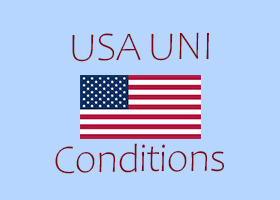
<style>
.page{position:relative;width:280px;height:200px;background:#b7d6ff}
.page>*{position:absolute;margin:0}
.t1{font:40.8px "Candara-Light";letter-spacing:-0.02em;color:#79040f}
</style>
<div class="page">
<p class="t1" style="left:72px;top:32px;width:138px;height:30px;rotate:-1deg">USA UNI</p>
<p class="t1" style="left:55px;top:143px;width:170px;height:31px;rotate:-1deg">Conditions</p>
</div>
